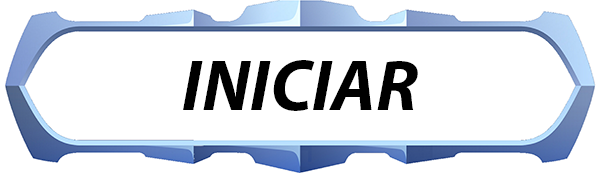
<style>
.page{position:relative;width:600px;height:173px;background:#ffffff}
.page>*{position:absolute;margin:0}
.t1{font:72px "MyriadPro-BoldIt";color:#000000}
</style>
<div class="page">
<p class="t1" style="left:183px;top:60px;width:235px;height:51px">INICIAR</p>
</div>
